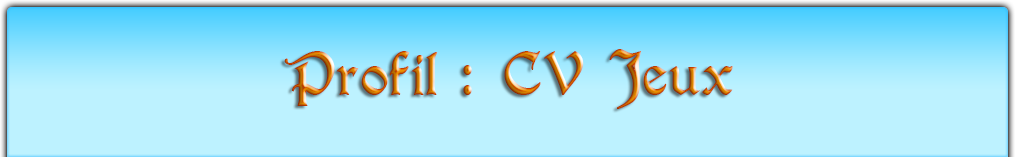
<style>
.page{position:relative;width:1015px;height:157px;background:#bdf2ff}
.page>*{position:absolute;margin:0}
.t1{font:56.7px "T4C-Beaulieux"}
</style>
<div class="page">
<p class="t1" style="left:284px;top:49px;width:449px;height:60px">Profil : CV Jeux</p>
</div>
